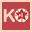
<style>
.page{position:relative;width:32px;height:32px;background:#ba4547}
.page>*{position:absolute;margin:0}
.t1{font:18px "ArialRoundedMTBold";color:#fed4bf}
</style>
<div class="page">
<p class="t1" style="left:3px;top:9px;width:12px;height:13px">K</p>
</div>
